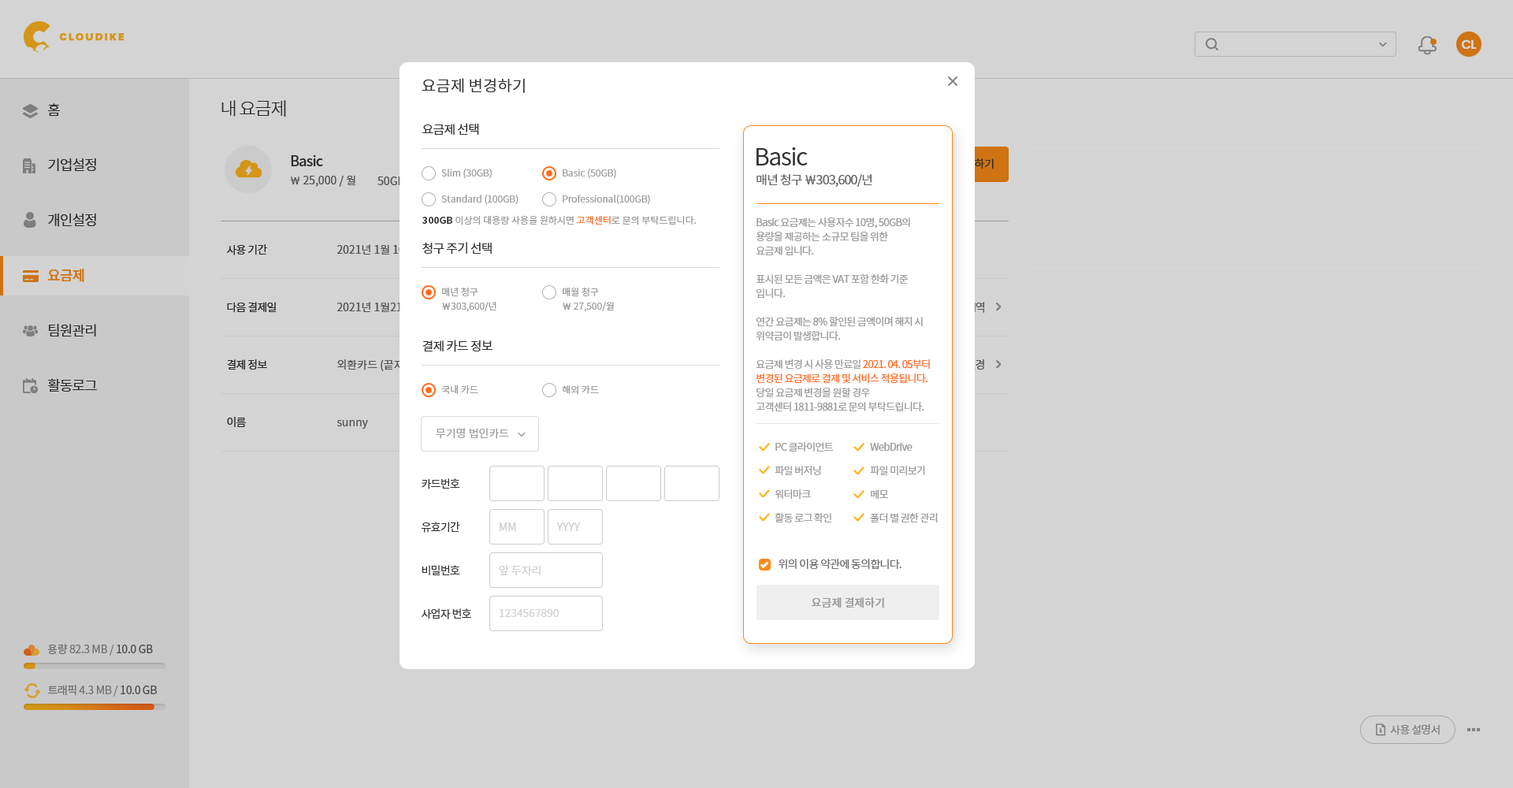
<style>
.page{position:relative;width:1513px;height:788px;background:#d4d4d4}
.page>*{position:absolute;margin:0}
.t1{font:15.8px "NotoSansCJKkr-DemiLight";color:#333333}
.t2{font:12.6px "NotoSansCJKkr-Regular";letter-spacing:-0.05em;color:#333333}
.t3{font:23.6px "NotoSansCJKkr-Regular";letter-spacing:-0.05em;color:#333333}
.t4{font:9.5px "NotoSansCJKkr-DemiLight";color:#999999}
.t5{font:12.6px "NotoSansCJKkr-Regular";letter-spacing:-0.05em;color:#666666}
.t6{font:9.5px "NotoSansCJKkr-Bold";color:#333333}
.t7{font:9.5px "NotoSansCJKkr-DemiLight";color:#ff6c1a}
.t8{font:10.2px/14.2px "NotoSansCJKkr-Regular";letter-spacing:-0.05em;color:#999999}
.t9{font:10.2px/14.2px "NotoSansCJKkr-Regular";letter-spacing:-0.05em;color:#ff6c1a}
.t10{font:9.5px/14.2px "NotoSansCJKkr-DemiLight";color:#999999}
.t11{font:11px "NotoSansCJKkr-DemiLight";color:#999999}
.t12{font:10.2px/23.6px "NotoSansCJKkr-Regular";letter-spacing:-0.05em;color:#999999}
.t13{font:10.2px/15.8px "NotoSansCJKkr-Regular";letter-spacing:-0.05em;color:#999999}
.t14{font:11px "NotoSansCJKkr-Regular";letter-spacing:-0.05em;color:#333333}
.t15{font:11px "NotoSansCJKkr-DemiLight";color:#cecece}
.t16{font:11px "NotoSansCJKkr-DemiLight";letter-spacing:-0.05em;color:#666666}
.t17{font:11px "NotoSansCJKkr-Medium";color:#999999}
</style>
<div class="page">
<p class="t1" style="left:422px;top:78px;width:103px;height:15px">요금제 변경하기</p>
<p class="t2" style="left:422px;top:123px;width:57px;height:12px">요금제 선택</p>
<p class="t3" style="left:757px;top:147px;width:51px;height:18px">Basic</p>
<p class="t4" style="left:441px;top:169px;width:51px;height:10px">Slim (30GB)</p>
<p class="t4" style="left:563px;top:169px;width:53px;height:10px">Basic (50GB)</p>
<p class="t5" style="left:757px;top:174px;width:115px;height:13px">매년 청구 ￦303,600/년</p>
<p class="t4" style="left:441px;top:195px;width:78px;height:10px">Standard (100GB)</p>
<p class="t4" style="left:563px;top:195px;width:87px;height:10px">Professional(100GB)</p>
<p class="t4" style="left:422px;top:215px;width:274px;height:10px"><span class="t6">300GB</span> 이상의 대용량 사용을 원하시면 <span class="t7">고객센터</span>로 문의 부탁드립니다.</p>
<p class="t8" style="left:756px;top:218px;width:174px;height:194px">Basic 요금제는 사용자수 10명, 50GB의 <br>용량을 제공하는 소규모 팀을 위한 <br>요금제 입니다. <br><br>표시된 모든 금액은 VAT 포함 한화 기준<br>입니다.<br><br>연간 요금제는 8% 할인된 금액이며 해지 시 <br>위약금이 발생합니다. <br><br>요금제 변경 시 사용 만료일 <span class="t9">2021. 04. 05부터 <br>변경된 요금제로 결제 및 서비스 적용됩니다.<br></span>당일 요금제 변경을 원할 경우<br>고객센터 1811-9881로 문의 부탁드립니다.</p>
<p class="t2" style="left:422px;top:242px;width:70px;height:13px">청구 주기 선택</p>
<p class="t10" style="left:442px;top:287px;width:54px;height:25px">매년 청구 <br>￦303,600/년</p>
<p class="t10" style="left:563px;top:288px;width:51px;height:24px">매월 청구 <br>￦ 27,500/월</p>
<p class="t2" style="left:422px;top:340px;width:71px;height:12px">결제 카드 정보</p>
<p class="t4" style="left:441px;top:385px;width:37px;height:9px">국내 카드</p>
<p class="t4" style="left:562px;top:385px;width:37px;height:10px">해외 카드</p>
<p class="t11" style="left:436px;top:428px;width:73px;height:11px">무기명 법인카드</p>
<p class="t12" style="left:775px;top:442px;width:59px;height:81px">PC 클라이언트<br>파일 버저닝<br>워터마크<br>활동 로그 확인</p>
<p class="t12" style="left:870px;top:442px;width:68px;height:80px"><span class="t13">ＷebDrive<br></span>파일 미리보기<br>메모<br>폴더 별 권한 관리</p>
<p class="t14" style="left:422px;top:478px;width:38px;height:11px">카드번호</p>
<p class="t14" style="left:422px;top:522px;width:38px;height:11px">유효기간</p>
<p class="t15" style="left:500px;top:522px;width:16px;height:9px">MM</p>
<p class="t15" style="left:556px;top:522px;width:25px;height:9px">YYYY</p>
<p class="t14" style="left:422px;top:565px;width:38px;height:10px">비밀번호</p>
<p class="t15" style="left:499px;top:565px;width:42px;height:11px">앞 두자리</p>
<p class="t16" style="left:779px;top:559px;width:123px;height:10px">위의 이용 약관에 동의합니다.</p>
<p class="t17" style="left:812px;top:597px;width:72px;height:11px">요금제 결제하기</p>
<p class="t14" style="left:422px;top:608px;width:49px;height:11px">사업자 번호</p>
<p class="t15" style="left:499px;top:609px;width:60px;height:8px">1234567890</p>
</div>
